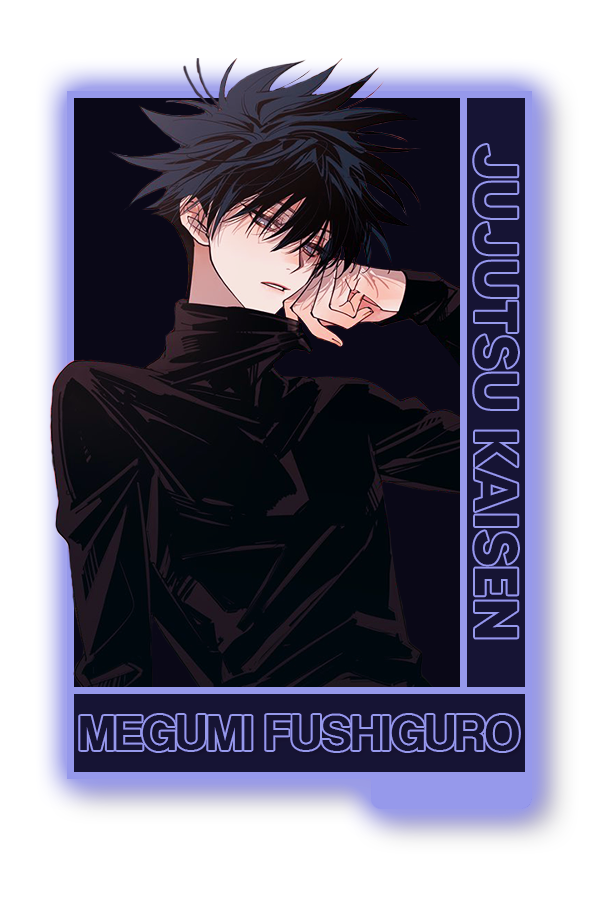
<style>
.page{position:relative;width:600px;height:900px;background:#ffffff}
.page>*{position:absolute;margin:0}
.t1{font:60.3px "MADETOMMY-Bold";color:#14182e}
.t2{font:51.9px "CoolveticaRg-Regular";color:#14182e}
</style>
<div class="page">
<p class="t1" style="left:474px;top:145px;width:44px;height:493px;rotate:90deg">JUJUTSU KAISEN</p>
<p class="t2" style="left:80px;top:715px;width:439px;height:36px">MEGUMI FUSHIGURO</p>
</div>
